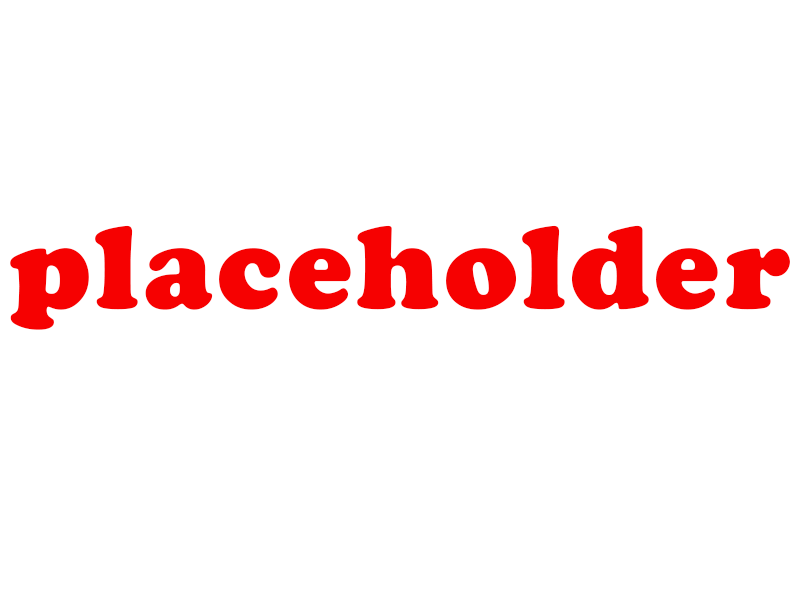
<style>
.page{position:relative;width:800px;height:600px;background:#ffffff}
.page>*{position:absolute;margin:0}
.t1{font:123.5px "CooperBlack";letter-spacing:0.05em;color:#f60101}
</style>
<div class="page">
<p class="t1" style="left:10px;top:225px;width:780px;height:105px">placeholder</p>
</div>
